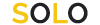
<style>
.page{position:relative;width:100px;height:25px;background:#ffffff}
.page>*{position:absolute;margin:0}
.t1{font:28px "Raleway-SemiBold";color:#f4c613;font-weight:bold}
.t2{font:28px "Raleway-SemiBold";color:#212226;font-weight:bold}
</style>
<div class="page">
<p class="t1" style="left:12px;top:2px;width:76px;height:22px">S<span class="t2">O</span>L<span class="t2">O</span></p>
</div>
